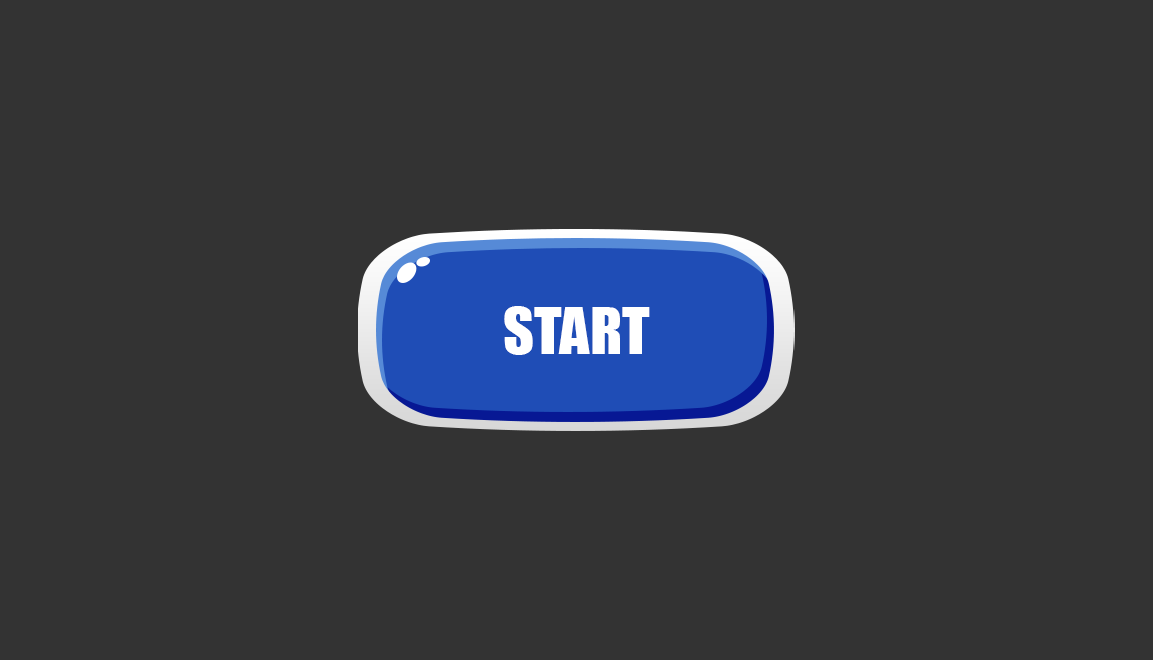
<style>
.page{position:relative;width:1153px;height:660px;background:#333333}
.page>*{position:absolute;margin:0}
.t1{font:60px "Impact";color:#ffffff}
</style>
<div class="page">
<p class="t1" style="left:504px;top:306px;width:146px;height:49px">START</p>
</div>
